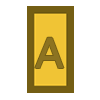
<style>
.page{position:relative;width:100px;height:100px;background:#ffffff}
.page>*{position:absolute;margin:0}
.t1{font:40px "Thonburi-Bold";color:#8c7321}
</style>
<div class="page">
<p class="t1" style="left:35px;top:37px;width:29px;height:31px">A</p>
</div>
